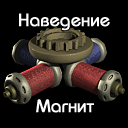
<style>
.page{position:relative;width:128px;height:128px;background:#000000}
.page>*{position:absolute;margin:0}
.t1{font:18px "BauhausC-Medium";color:#ffffff;font-weight:bold}
</style>
<div class="page">
<p class="t1" style="left:19px;top:13px;width:91px;height:18px">Наведение</p>
<p class="t1" style="left:36px;top:99px;width:58px;height:14px">Магнит</p>
</div>
